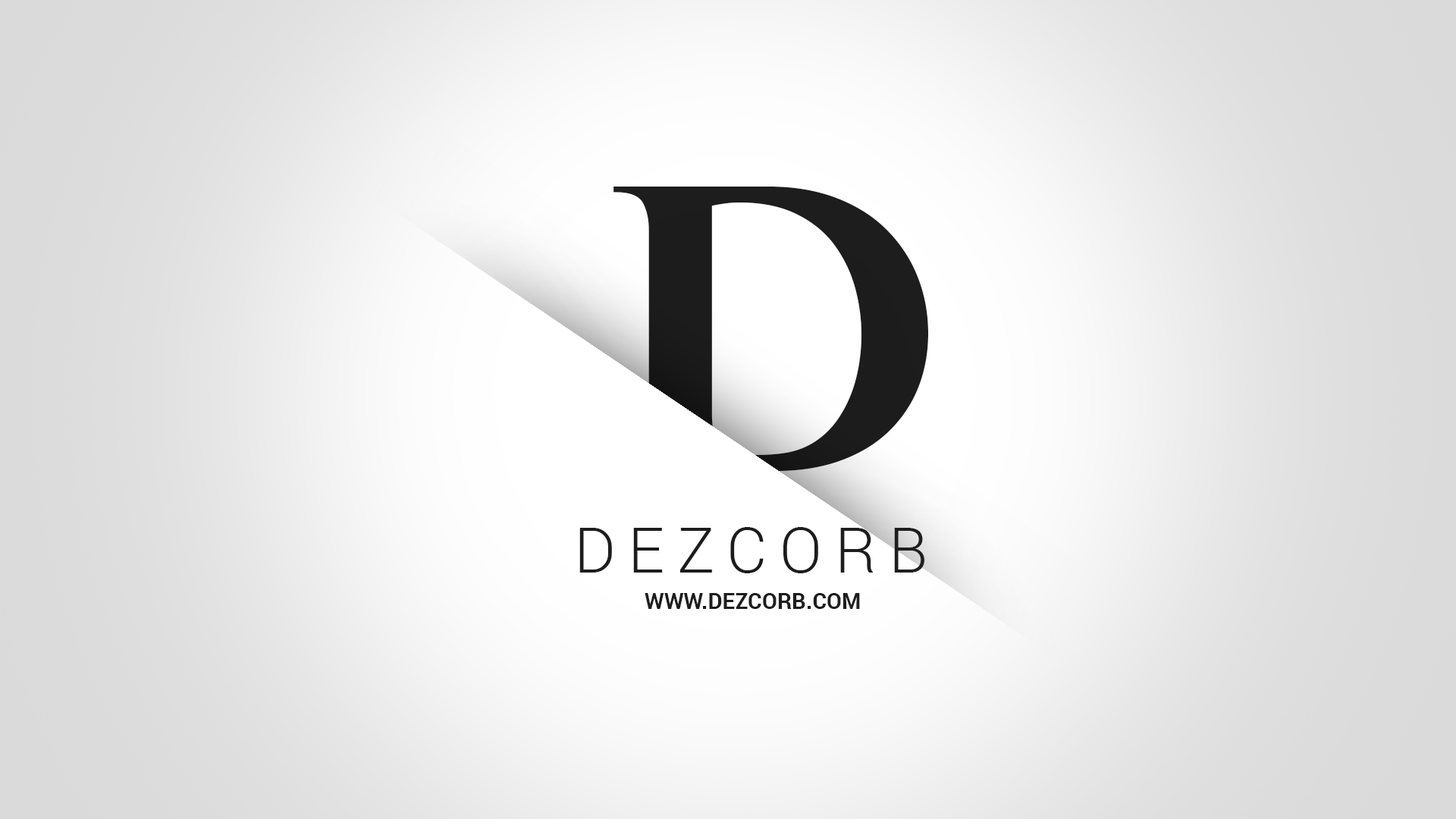
<style>
.page{position:relative;width:1456px;height:819px}
.page>*{position:absolute;margin:0}
.t1{font:395px "PerpetuaTitlingMT-Bold";color:#1c1c1c}
.t2{font:63.2px "Roboto-Light";letter-spacing:0.2em;color:#1c1c1c}
.t3{font:22.1px "Roboto-Bold";color:#1c1c1c}
</style>
<div class="page">
<p class="t1" style="left:613px;top:187px;width:315px;height:284px">D</p>
<p class="t2" style="left:579px;top:527px;width:345px;height:46px">DEZCORB</p>
<p class="t3" style="left:645px;top:593px;width:215px;height:16px">WWW.DEZCORB.COM</p>
</div>
